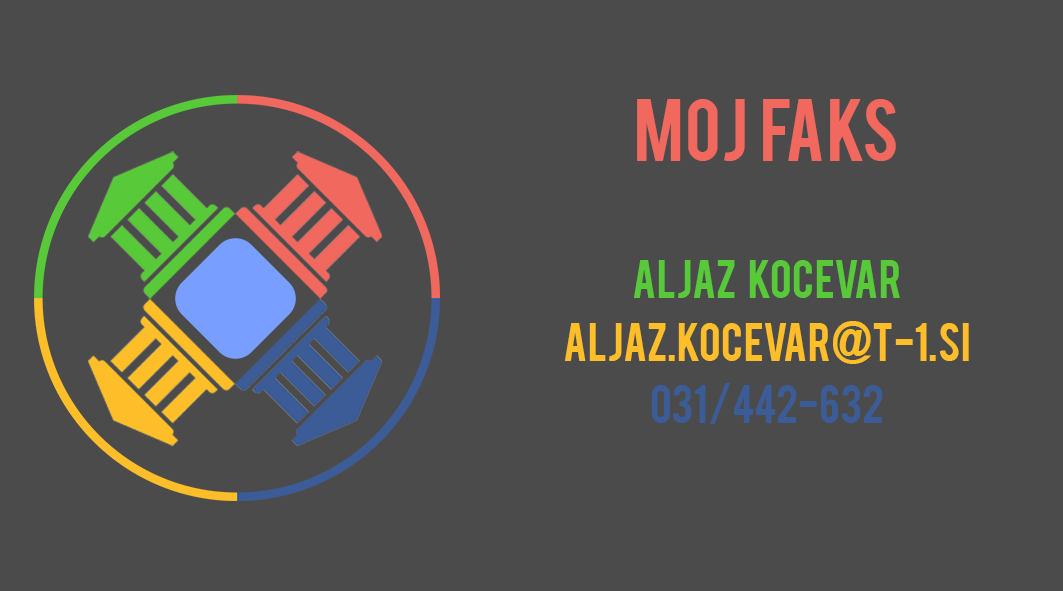
<style>
.page{position:relative;width:1063px;height:591px;background:#4b4b4b}
.page>*{position:absolute;margin:0}
.t1{font:69px "Bebas";color:#f1685e}
.t2{font:41.7px "Bebas";color:#58c938}
.t3{font:41.7px "Bebas";color:#febe29}
.t4{font:41.7px "Bebas";color:#3c5c98}
</style>
<div class="page">
<p class="t1" style="left:637px;top:99px;width:259px;height:62px">MOJ  faks</p>
<p class="t2" style="left:634px;top:260px;width:266px;height:38px">aljaz   kocevar</p>
<p class="t3" style="left:565px;top:321px;width:404px;height:43px">aljaz.kocevar@t-1.si</p>
<p class="t4" style="left:651px;top:383px;width:232px;height:41px">031/442-632</p>
</div>
